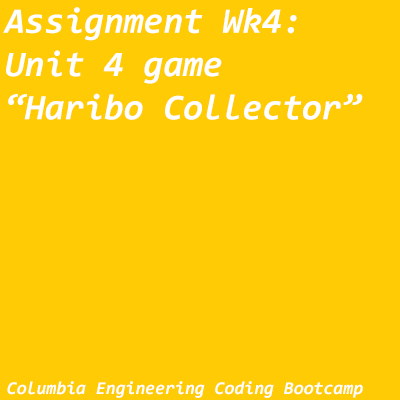
<style>
.page{position:relative;width:400px;height:400px;background:#ffcb05}
.page>*{position:absolute;margin:0}
.t1{font:36px "Consolas-BoldItalic";color:#ffffff}
.t2{font:18px "Consolas-BoldItalic";color:#ffffff}
</style>
<div class="page">
<p class="t1" style="left:3px;top:7px;width:360px;height:113px">Assignment Wk4:<br>Unit 4 game<br>“Haribo Collector”</p>
<p class="t2" style="left:7px;top:381px;width:356px;height:17px">Columbia Engineering Coding Bootcamp</p>
</div>
